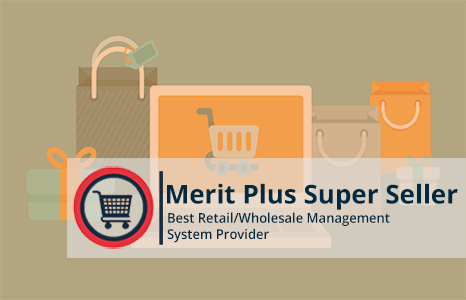
<style>
.page{position:relative;width:466px;height:300px;background:#b3a57f}
.page>*{position:absolute;margin:0}
.t1{font:26px "OpenSans-Bold";color:#002a41}
.t2{font:13.5px "OpenSans-Semibold";color:#002a41;scale:0.96 1}
</style>
<div class="page">
<p class="t1" style="left:167px;top:183px;width:291px;height:27px">Merit Plus Super Seller</p>
<p class="t2" style="left:167px;top:212px;width:223px;height:31px">Best Retail/Wholesale Management<br>System Provider</p>
</div>
